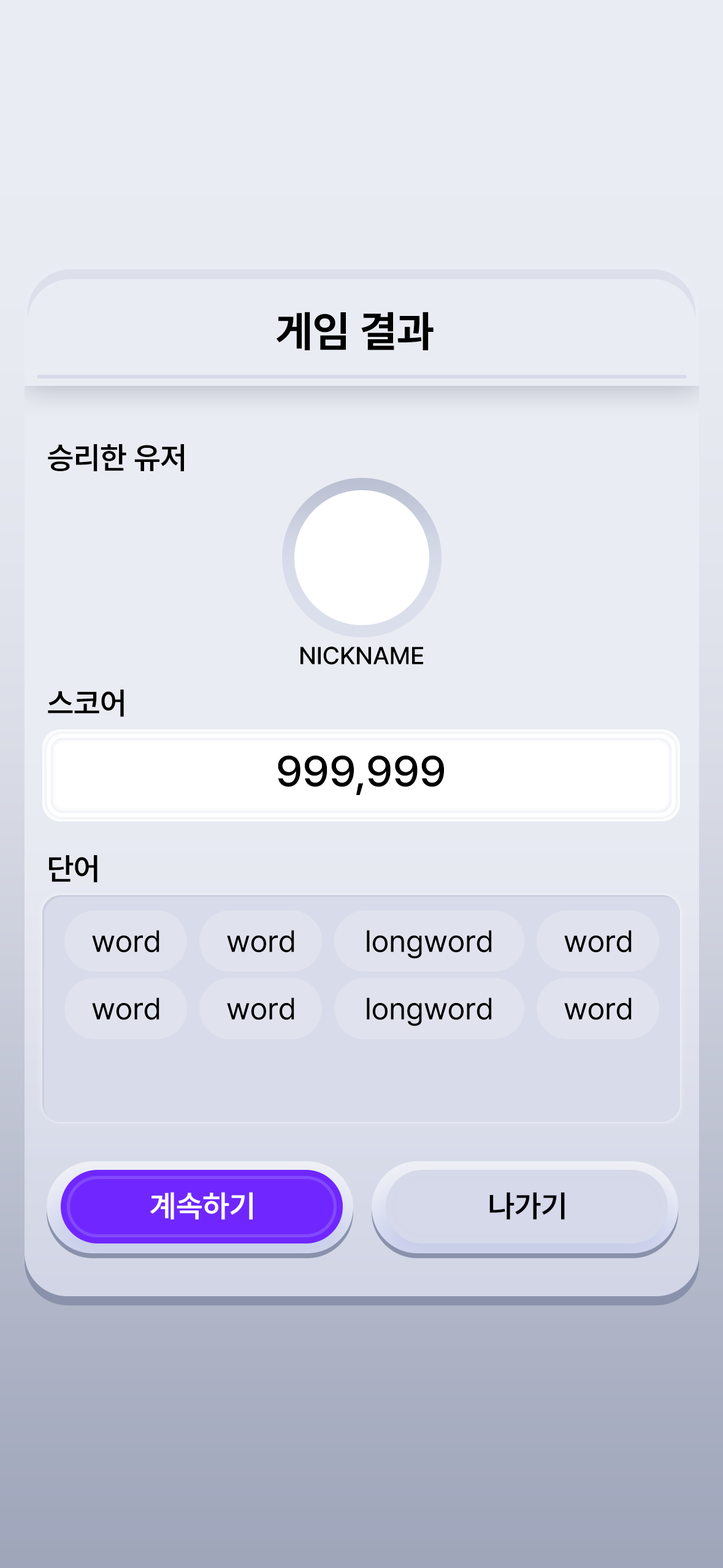
<style>
.page{position:relative;width:723px;height:1568px;background:#eaecf3}
.page>*{position:absolute;margin:0}
.t1{font:42.9px "PretendardVariable-Bold";color:#000000}
.t2{font:30.7px "PretendardVariable-SemiBold";color:#000000}
.t3{font:24.5px "PretendardVariable-Medium";color:#000000}
.t4{font:42.9px "PretendardVariable-Medium";color:#000000}
.t5{font:30.7px "PretendardVariable-SemiBold";color:#ffffff}
</style>
<div class="page">
<p class="t1" style="left:276px;top:312px;width:158px;height:38px">게임 결과</p>
<p class="t2" style="left:48px;top:444px;width:136px;height:28px">승리한 유저</p>
<p class="t3" style="left:301px;top:647px;width:122px;height:18px">NICKNAME</p>
<p class="t2" style="left:48px;top:690px;width:76px;height:27px">스코어</p>
<p class="t4" style="left:278px;top:755px;width:166px;height:40px">999,999</p>
<p class="t2" style="left:49px;top:855px;width:49px;height:28px">단어</p>
<p class="t5" style="left:150px;top:1192px;width:103px;height:28px">계속하기</p>
<p class="t2" style="left:490px;top:1192px;width:75px;height:28px">나가기</p>
</div>
